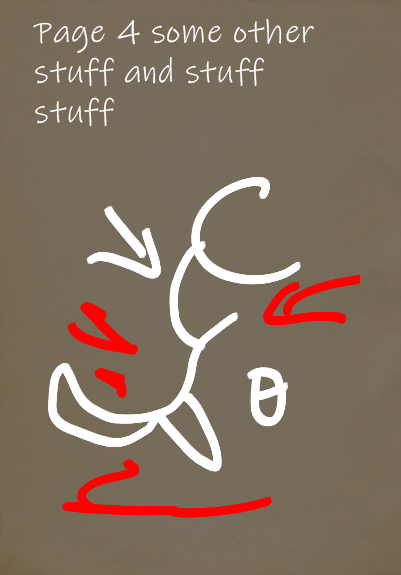
<style>
.page{position:relative;width:401px;height:575px}
.page>*{position:absolute;margin:0}
.t1{font:33px "InkFree";letter-spacing:0.025em;color:#ffffff}
</style>
<div class="page">
<p class="t1" style="left:33px;top:19px;width:281px;height:107px">Page 4 some other stuff and stuff stuff</p>
</div>
